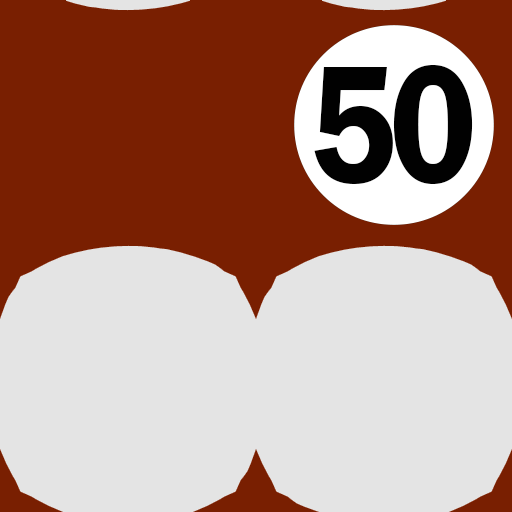
<style>
.page{position:relative;width:512px;height:512px;background:#e4e4e4}
.page>*{position:absolute;margin:0}
.t1{font:172.5px "FranklinGothic-Demi";letter-spacing:-0.05em;color:#010101;scale:0.87 1}
</style>
<div class="page">
<p class="t1" style="left:314px;top:65px;width:159px;height:119px">50</p>
</div>
